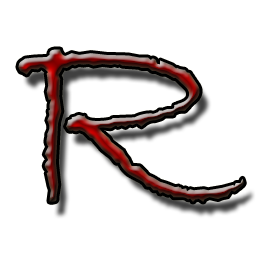
<style>
.page{position:relative;width:256px;height:256px;background:#ffffff}
.page>*{position:absolute;margin:0}
.t1{font:300px "BradleyHandITC"}
</style>
<div class="page">
<p class="t1" style="left:18px;top:49px;width:226px;height:153px">R</p>
</div>
